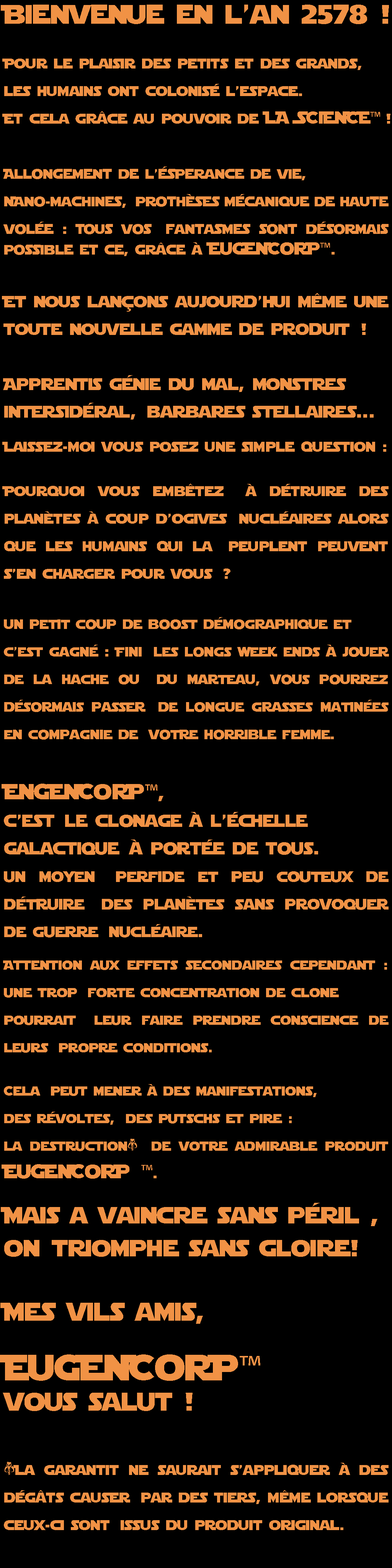
<style>
.page{position:relative;width:392px;height:1568px;background:#000000}
.page>*{position:absolute;margin:0}
.t1{font:13px "StarJedi";color:#f19245}
.t2{font:26.8px "StarJedi";color:#f19245}
.t3{font:14.2px "StarJedi";color:#f19245}
.t4{font:17.2px "StarJedi";color:#f19245}
.t5{font:17.2px "MyriadPro-Regular";color:#f19245}
.t6{font:13.8px "StarJedi";color:#f19245}
.t7{font:16.5px "StarJedi";color:#f19245}
.t8{font:16.8px "StarJedi";color:#f19245}
.t9{font:13.4px "StarJedi";color:#f19245}
.t10{font:21.8px "StarJedi";color:#f19245}
.t11{font:21.8px "MyriadPro-Regular";color:#f19245}
.t12{font:18.4px "StarJedi";color:#f19245}
.t13{font:14.9px "StarJedi";color:#f19245}
.t14{font:19.5px "StarJedi";color:#f19245}
.t15{font:19.5px "MyriadPro-Regular";color:#f19245}
.t16{font:23.4px "StarJedi";color:#f19245}
.t17{font:25.3px "StarJedi";color:#f19245}
.t18{font:36.4px "StarJedi";color:#f19245}
.t19{font:36.4px "MyriadPro-Regular";color:#f19245}
</style>
<div class="page">
<p class="t1" style="left:0px;top:5px;width:390px;height:1525px;text-align:justify"><span class="t2">Bienvenue en l’an 2578 !<br> <br></span><span class="t3">Pour le plaisir des petits et des grands, <br>les humains ont colonisé l’espace. <br>Et cela grâce au pouvoir de </span><span class="t4">LA SCiENCE</span><span class="t5">™ </span><span class="t3">! <br><br></span><span class="t6">Allongement de l’ésperance de vie,  <br>Nano-machines, prothèses mécanique de haute volée : Tous vos fantasmes sont désormais possible et ce, grâce à </span><span class="t4">EuGENCoRP</span><span class="t5">™</span><span class="t6">.<br><br></span><span class="t7">Et nous lançons aujourd’hui même une toute nouvelle gamme de produit ! <br><br></span><span class="t8">Apprentis génie du mal, monstres <br>intersidéral, barbares stellaires...<br></span><span class="t3"><br>Laissez-moi vous posez une simple question : <br><br>Pourquoi vous embêtez à détruire des planètes à coup d’ogives nucléaires alors que les humains qui la peuplent peuvent s’en charger pour vous ? <br><br><br></span><span class="t9">un petit coup de boost démographique et <br>c’est gagné : Fini les longs week ends à jouer de la hache ou du marteau, vous pourrez désormais passer de longue grasses matinées en compagnie de votre horrible femme.<br><br><br></span><span class="t10">EnGENCoRP</span><span class="t11">™</span><span class="t12">, <br></span><span class="t4">c’est le clonage à l’échelle <br>galactique à portée de tous. <br></span><span class="t13">un moyen perfide et peu couteux de détruire des planètes sans provoquer de guerre nucléaire. <br><br></span>Attention aux effets secondaires cependant : une trop forte concentration de clone <br>pourrait leur faire prendre conscience de leurs propre conditions. <br><br>Cela peut mener à des manifestations, <br>des révoltes, des putschs et pire : <br>la destruction* de votre admirable produit <span class="t14">EuGENCoRP </span><span class="t15">™</span><span class="t3">.<br><br></span><span class="t16">Mais a vaincre sans péril ,<br>on triomphe sans gloire!<br><br><br></span><span class="t17">Mes vils amis, <br></span><span class="t18">EuGENCoRP</span><span class="t19">™ <br></span><span class="t17">vous salut !<br><br></span><span class="t3"><br>*La garantit ne saurait s’appliquer à des dégâts causer par des tiers, même lorsque ceux-ci sont issus du produit original.</span></p>
</div>
